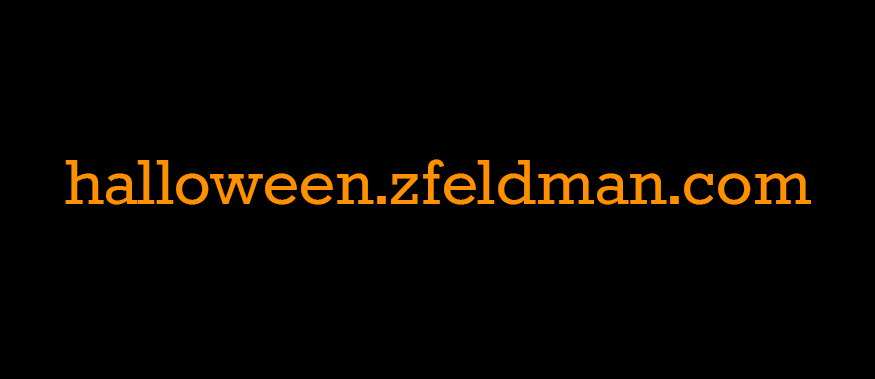
<style>
.page{position:relative;width:875px;height:379px;background:#000000}
.page>*{position:absolute;margin:0}
.t1{font:77.1px "Rokkitt";color:#ff9100}
</style>
<div class="page">
<p class="t1" style="left:65px;top:159px;width:746px;height:46px">halloween.zfeldman.com</p>
</div>
